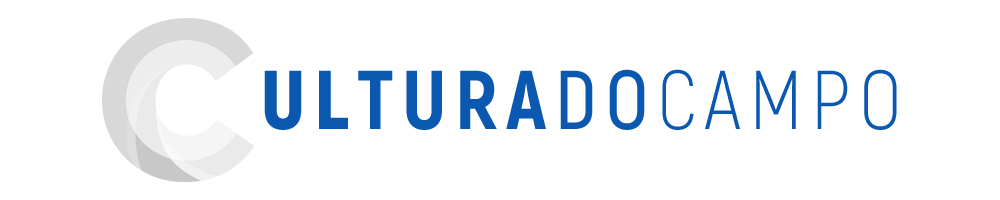
<style>
.page{position:relative;width:1000px;height:200px;background:#ffffff}
.page>*{position:absolute;margin:0}
.t1{font:83.3px "Akrobat-Light";letter-spacing:0.1em;color:#0a58b0;text-transform:uppercase}
.t2{font:83.3px "Akrobat-Black";letter-spacing:0.1em;color:#0a58b0;text-transform:uppercase}
.t3{font:83.3px "Akrobat-ExtraBold";letter-spacing:0.1em;color:#0a58b0;text-transform:uppercase}
.t4{font:83.3px "Akrobat-SemiBold";letter-spacing:0.1em;color:#0a58b0;text-transform:uppercase}
</style>
<div class="page">
<p class="t1" style="left:264px;top:69px;width:633px;height:61px"><span class="t2">ul</span><span class="t3">tura</span><span class="t4">do</span>campo</p>
</div>
